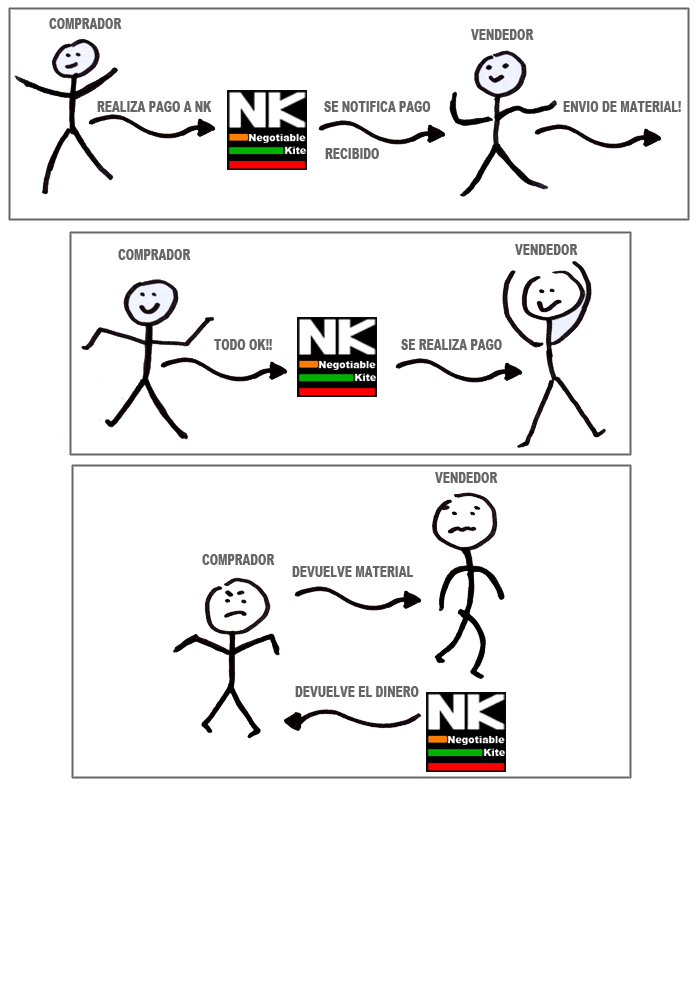
<style>
.page{position:relative;width:700px;height:1000px;background:#ffffff}
.page>*{position:absolute;margin:0}
.t1{font:15px "Arial-Black";color:#666666;scale:0.67 1}
</style>
<div class="page">
<p class="t1" style="left:49px;top:18px;width:73px;height:11px">COMPRADOR</p>
<p class="t1" style="left:471px;top:29px;width:63px;height:11px">VENDEDOR</p>
<p class="t1" style="left:97px;top:101px;width:115px;height:11px">REALIZA PAGO A NK</p>
<p class="t1" style="left:324px;top:101px;width:107px;height:11px">SE NOTIFICA PAGO</p>
<p class="t1" style="left:563px;top:101px;width:118px;height:11px">ENVIO DE MATERIAL!</p>
<p class="t1" style="left:325px;top:148px;width:54px;height:11px">RECIBIDO</p>
<p class="t1" style="left:515px;top:244px;width:63px;height:11px">VENDEDOR</p>
<p class="t1" style="left:118px;top:249px;width:73px;height:11px">COMPRADOR</p>
<p class="t1" style="left:214px;top:339px;width:58px;height:11px">TODO OK!!</p>
<p class="t1" style="left:401px;top:339px;width:101px;height:11px">SE REALIZA PAGO</p>
<p class="t1" style="left:435px;top:472px;width:63px;height:11px">VENDEDOR</p>
<p class="t1" style="left:202px;top:554px;width:73px;height:11px">COMPRADOR</p>
<p class="t1" style="left:292px;top:566px;width:121px;height:11px">DEVUELVE MATERIAL</p>
<p class="t1" style="left:295px;top:686px;width:124px;height:11px">DEVUELVE EL DINERO</p>
</div>
